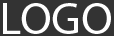
<style>
.page{position:relative;width:114px;height:36px;background:#333333}
.page>*{position:absolute;margin:0}
.t1{font:45.8px "MyriadPro-Regular";color:#ffffff}
</style>
<div class="page">
<p class="t1" style="left:3px;top:3px;width:108px;height:31px">LOGO</p>
</div>
